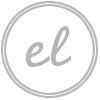
<style>
.page{position:relative;width:100px;height:100px;background:#ffffff}
.page>*{position:absolute;margin:0}
.t1{font:60px "JCfg";color:#b5b5b5}
</style>
<div class="page">
<p class="t1" style="left:25px;top:26px;width:46px;height:41px">el</p>
</div>
